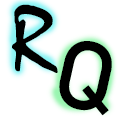
<style>
.page{position:relative;width:118px;height:118px;background:#ffffff}
.page>*{position:absolute;margin:0}
.t1{font:95.8px "Mistral";color:#000000}
.t2{font:95.8px "Bahnschrift";color:#000000}
</style>
<div class="page">
<p class="t1" style="left:12px;top:4px;width:46px;height:69px;rotate:-3deg">R</p>
<p class="t2" style="left:59px;top:41px;width:53px;height:75px;rotate:13deg">Q</p>
</div>
